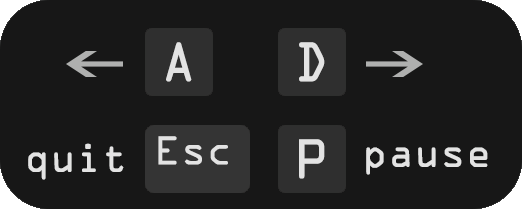
<style>
.page{position:relative;width:522px;height:209px;background:#171717}
.page>*{position:absolute;margin:0}
.t1{font:50.4px "OCRAStd";color:#e3e3e3}
.t2{font:36px "OCRAStd";color:#e3e3e3}
</style>
<div class="page">
<p class="t1" style="left:166px;top:42px;width:26px;height:40px">A</p>
<p class="t1" style="left:299px;top:42px;width:26px;height:40px">D</p>
<p class="t2" style="left:158px;top:136px;width:70px;height:29px">Esc</p>
<p class="t2" style="left:28px;top:143px;width:96px;height:37px">quit</p>
<p class="t1" style="left:299px;top:139px;width:26px;height:40px">P</p>
<p class="t2" style="left:366px;top:147px;width:122px;height:28px">pause</p>
</div>
